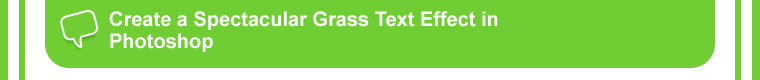
<style>
.page{position:relative;width:760px;height:80px;background:#70ce34}
.page>*{position:absolute;margin:0}
.t1{font:20px/22px "Arial-BoldMT";color:#ffffff}
</style>
<div class="page">
<p class="t1" style="left:109px;top:11px;width:389px;height:41px">Create a Spectacular Grass Text Effect in <br>Photoshop</p>
</div>
